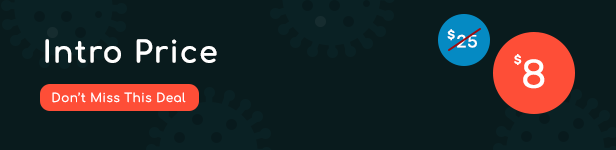
<style>
.page{position:relative;width:616px;height:150px;background:#091b1d}
.page>*{position:absolute;margin:0}
.t1{font:12px "Rubik-Medium";letter-spacing:0.04em;color:#ffffff}
.t2{font:30px "Comfortaa-Bold";letter-spacing:0.04em;color:#ffffff}
.t3{font:17.6px "Rubik-Regular";letter-spacing:0.04em;color:#ffffff}
.t4{font:40px "Rubik-Regular";letter-spacing:0.04em;color:#ffffff}
.t5{font:12px "Comfortaa-Regular";letter-spacing:0.04em;color:#ffffff}
</style>
<div class="page">
<p class="t1" style="left:447px;top:29px;width:8px;height:12px">$</p>
<p class="t2" style="left:45px;top:39px;width:172px;height:24px">Intro Price</p>
<p class="t3" style="left:457px;top:34px;width:20px;height:14px">25</p>
<p class="t1" style="left:514px;top:54px;width:8px;height:11px">$</p>
<p class="t4" style="left:523px;top:59px;width:22px;height:30px">8</p>
<p class="t5" style="left:52px;top:92px;width:134px;height:11px">Don’t Miss This Deal</p>
</div>
